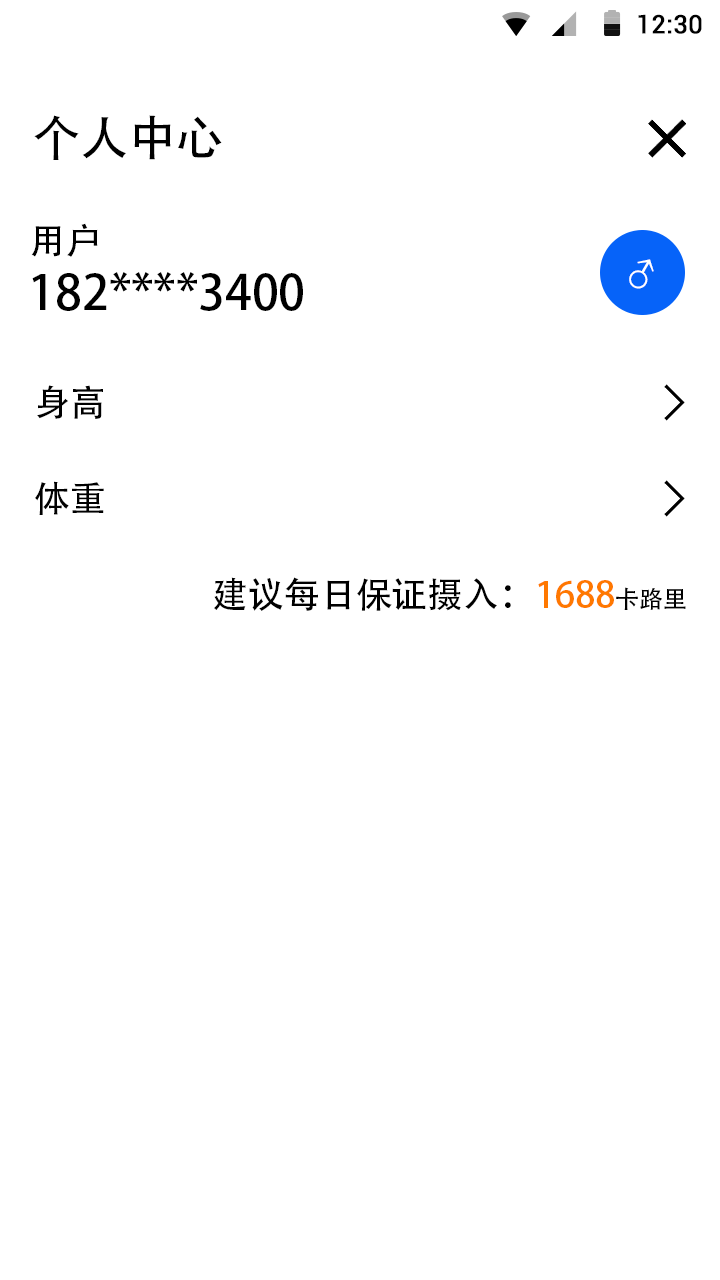
<style>
.page{position:relative;width:720px;height:1280px;background:#ffffff}
.page>*{position:absolute;margin:0}
.t1{font:25.4px "Roboto-Regular";color:#000000;font-weight:bold}
.t2{font:48px "AdobeHeitiStd-Regular";letter-spacing:-0.004em;color:#000000}
.t3{font:36px "AdobeHeitiStd-Regular";letter-spacing:-0.004em;color:#000000}
.t4{font:48px "AdobeHeitiStd-Regular";letter-spacing:-0.004em;color:#ffffff}
.t5{font:36px "AdobeHeitiStd-Regular";letter-spacing:-0.004em;color:#ff7800}
.t6{font:24px "AdobeHeitiStd-Regular";letter-spacing:-0.004em;color:#000000}
</style>
<div class="page">
<p class="t1" style="left:638px;top:14px;width:64px;height:20px">12:30</p>
<p class="t2" style="left:34px;top:115px;width:188px;height:45px">个人中心</p>
<p class="t3" style="left:31px;top:223px;width:67px;height:34px">用户</p>
<p class="t4" style="left:629px;top:259px;width:25px;height:30px;rotate:30deg">♂</p>
<p class="t2" style="left:32px;top:272px;width:271px;height:39px">182****3400</p>
<p class="t3" style="left:37px;top:385px;width:66px;height:34px">身高</p>
<p class="t3" style="left:35px;top:481px;width:69px;height:34px">体重</p>
<p class="t3" style="left:214px;top:577px;width:472px;height:34px">建议每日保证摄入：<span class="t5">1688</span><span class="t6">卡路里</span></p>
</div>
